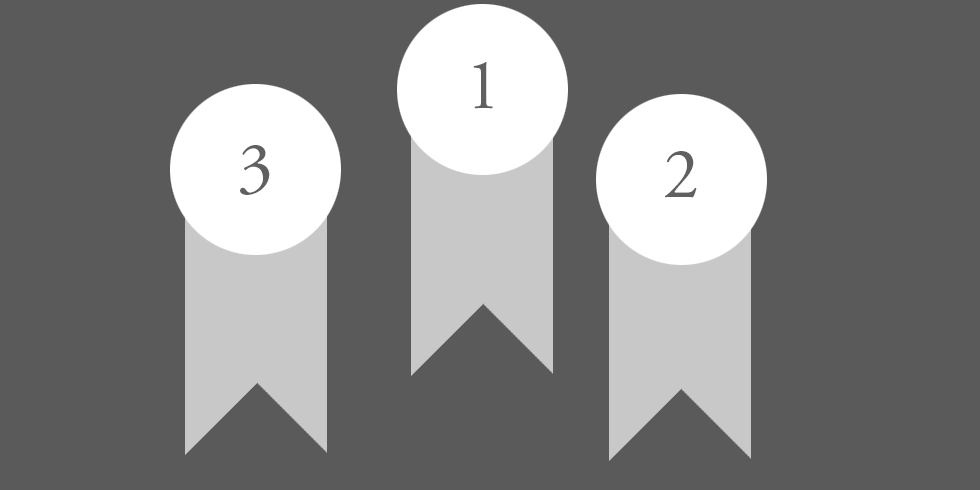
<style>
.page{position:relative;width:980px;height:490px;background:#5b5a5a}
.page>*{position:absolute;margin:0}
.t1{font:72px "AGaramondPro-Regular";color:#616060}
</style>
<div class="page">
<p class="t1" style="left:473px;top:62px;width:20px;height:47px">1</p>
<p class="t1" style="left:240px;top:145px;width:30px;height:50px">3</p>
<p class="t1" style="left:665px;top:151px;width:32px;height:47px">2</p>
</div>
